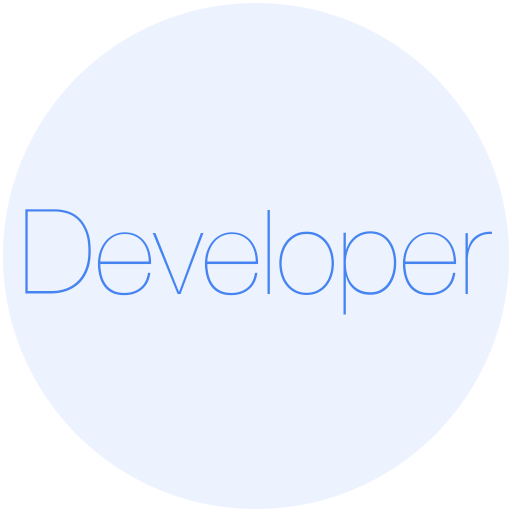
<style>
.page{position:relative;width:512px;height:512px;background:#ecf3fe}
.page>*{position:absolute;margin:0}
.t1{font:117.7px "HelveticaNeue-UltraLight";color:#4585f2}
</style>
<div class="page">
<p class="t1" style="left:25px;top:209px;width:467px;height:106px">Developer</p>
</div>
